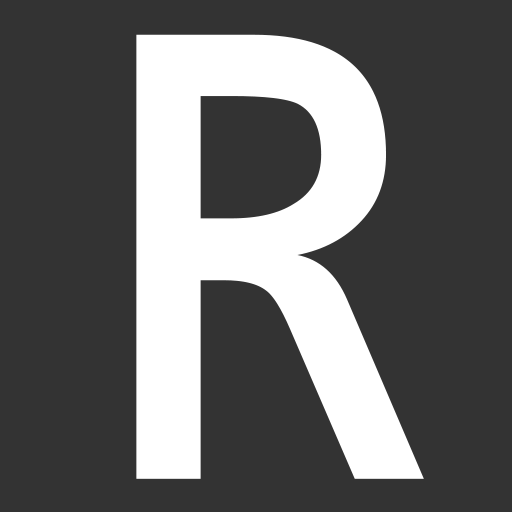
<style>
.page{position:relative;width:512px;height:512px;background:#333333}
.page>*{position:absolute;margin:0}
.t1{font:600px "JejuGothic";color:#ffffff}
</style>
<div class="page">
<p class="t1" style="left:136px;top:34px;width:288px;height:445px">R</p>
</div>
